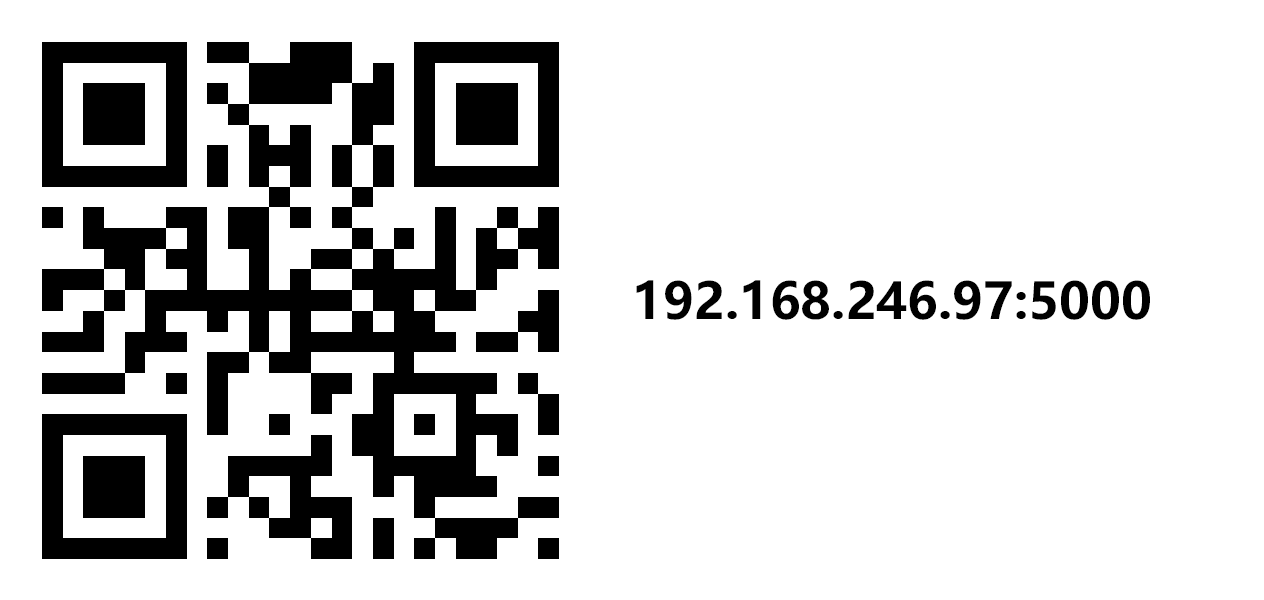
<style>
.page{position:relative;width:1264px;height:600px;background:#ffffff}
.page>*{position:absolute;margin:0}
.t1{font:50px "MicrosoftYaHeiUI-Bold";color:#000000}
</style>
<div class="page">
<p class="t1" style="left:636px;top:280px;width:514px;height:40px">192.168.246.97:5000</p>
</div>
